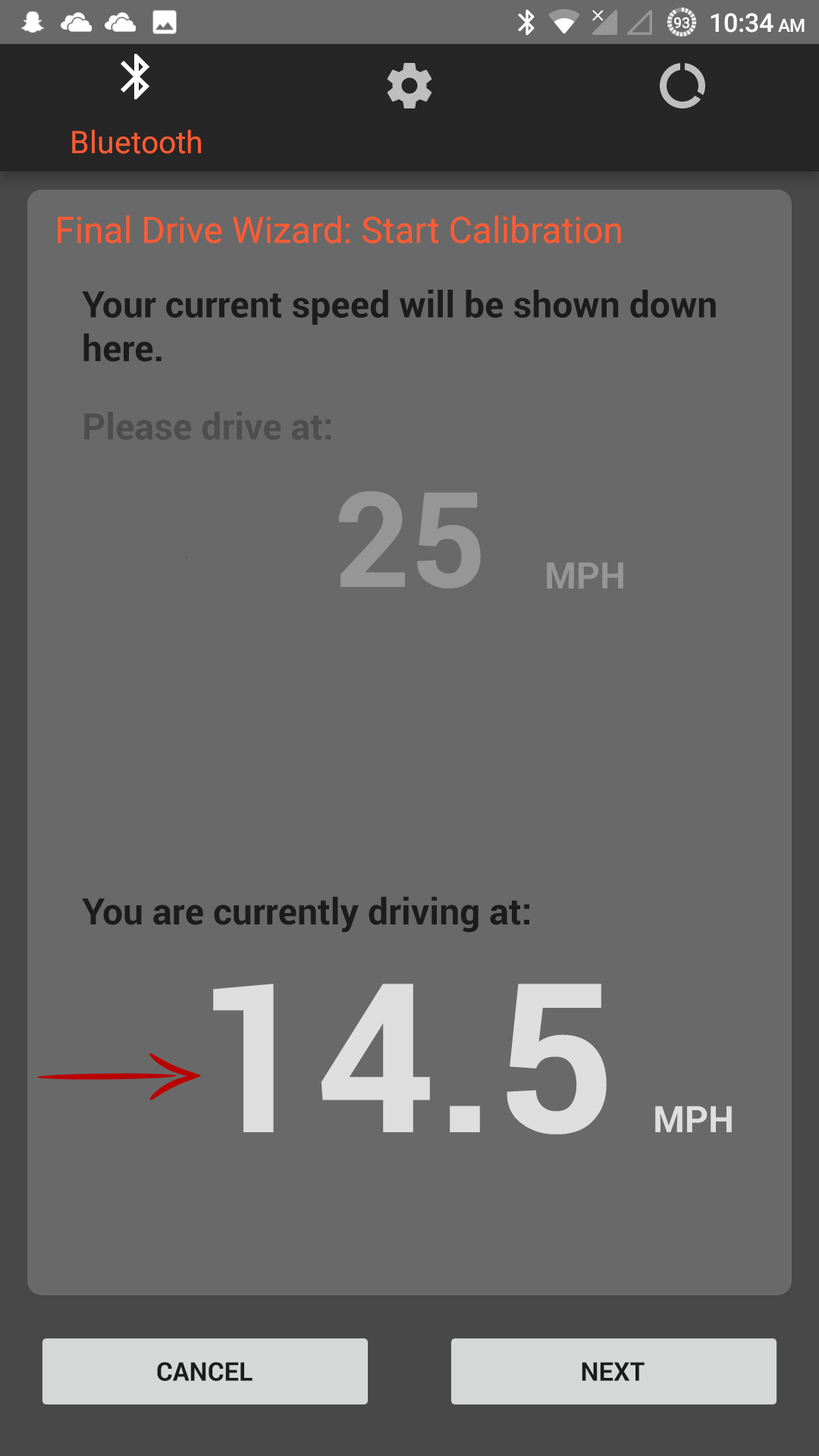
<style>
.page{position:relative;width:819px;height:1456px;background:#696969}
.page>*{position:absolute;margin:0}
.t1{font:36.4px "Roboto-Regular";color:#ff5c33}
.t2{font:36.4px "Roboto-Bold";color:#1c1c1c}
.t3{font:36.4px "Roboto-Bold";color:#4e4e4e}
.t4{font:132.7px "Roboto-Bold";color:#969696}
.t5{font:36.4px "Roboto-Bold";color:#969696}
.t6{font:208.5px "Roboto-Bold";color:#dedede}
.t7{font:36.4px "Roboto-Bold";color:#dedede}
.t8{font:25.8px "Roboto-Bold";color:#1c1c1c}
</style>
<div class="page">
<p class="t1" style="left:58px;top:215px;width:563px;height:28px">Final Drive Wizard: Start Calibration</p>
<p class="t2" style="left:82px;top:290px;width:634px;height:72px">Your current speed will be shown down<br>here.</p>
<p class="t3" style="left:84px;top:412px;width:247px;height:28px">Please drive at:</p>
<p class="t4" style="left:339px;top:491px;width:142px;height:97px">25</p>
<p class="t5" style="left:547px;top:562px;width:76px;height:26px">MPH</p>
<p class="t2" style="left:82px;top:896px;width:447px;height:37px">You are currently driving at:</p>
<p class="t6" style="left:213px;top:984px;width:394px;height:150px">14.5</p>
<p class="t7" style="left:655px;top:1106px;width:77px;height:26px">MPH</p>
<p class="t8" style="left:157px;top:1362px;width:96px;height:19px">CANCEL</p>
<p class="t8" style="left:582px;top:1362px;width:63px;height:19px">NEXT</p>
</div>
